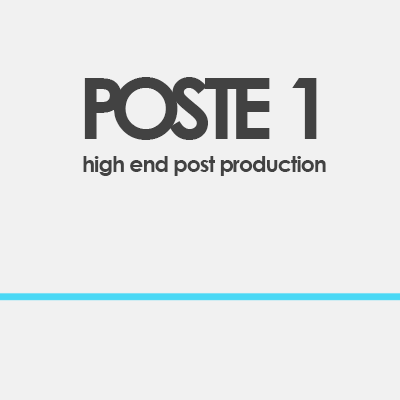
<style>
.page{position:relative;width:400px;height:400px;background:#f1f1f1}
.page>*{position:absolute;margin:0}
.t1{font:85px "CenturyGothic-Bold";letter-spacing:-0.1em;color:#424242}
.t2{font:85px "CenturyGothic-Bold";letter-spacing:-0.06em;color:#424242}
.t3{font:21.8px "CenturyGothic-Bold";letter-spacing:-0.04em;color:#424242}
</style>
<div class="page">
<p class="t1" style="left:84px;top:77px;width:233px;height:63px">POSTE <span class="t2">1</span></p>
<p class="t3" style="left:83px;top:156px;width:243px;height:20px">high end post production</p>
</div>
